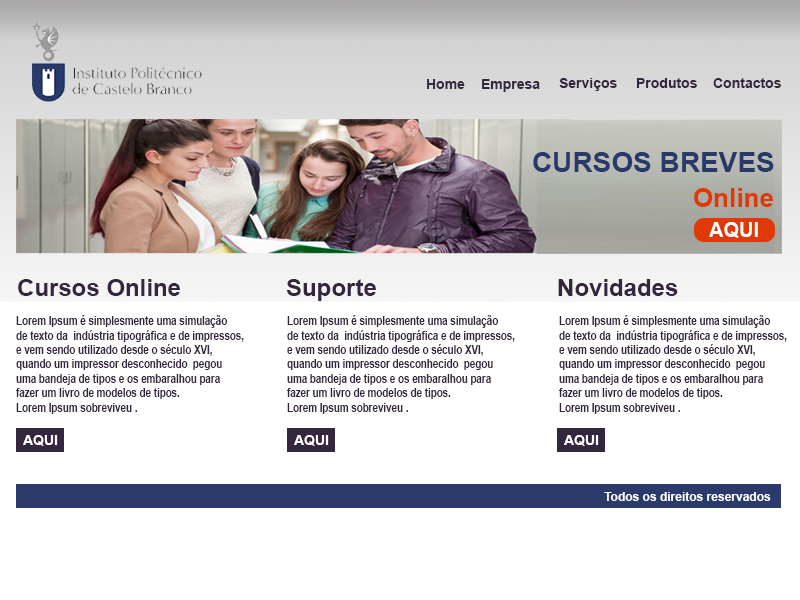
<style>
.page{position:relative;width:800px;height:600px;background:#ffffff}
.page>*{position:absolute;margin:0}
.t1{font:14px "Arial-BoldMT";color:#35263f}
.t2{font:28px "Arial-BoldMT";color:#283a69}
.t3{font:26px "Arial-BoldMT";color:#de3906}
.t4{font:20px "Arial-BoldMT";color:#ffffff}
.t5{font:24px "Arial-BoldMT";color:#35263f}
.t6{font:12px "Arial-BoldMT";color:#35263f;scale:0.82 1}
.t7{font:12px "Arial-BoldMT";color:#ffffff}
</style>
<div class="page">
<p class="t1" style="left:559px;top:78px;width:58px;height:13px">Serviços</p>
<p class="t1" style="left:636px;top:78px;width:61px;height:10px">Produtos</p>
<p class="t1" style="left:713px;top:78px;width:68px;height:10px">Contactos</p>
<p class="t1" style="left:427px;top:79px;width:38px;height:10px">Home</p>
<p class="t1" style="left:482px;top:79px;width:58px;height:13px">Empresa</p>
<p class="t2" style="left:533px;top:152px;width:241px;height:20px">CURSOS BREVES</p>
<p class="t3" style="left:694px;top:188px;width:79px;height:19px">Online</p>
<p class="t4" style="left:709px;top:222px;width:49px;height:16px">AQUI</p>
<p class="t5" style="left:18px;top:279px;width:162px;height:17px">Cursos Online</p>
<p class="t5" style="left:286px;top:279px;width:90px;height:22px">Suporte</p>
<p class="t5" style="left:558px;top:279px;width:120px;height:17px">Novidades</p>
<p class="t6" style="left:16px;top:315px;width:228px;height:99px">Lorem Ipsum é simplesmente uma simulação<br>de texto da  indústria tipográfica e de impressos,<br>e vem sendo utilizado desde o século XVI, <br>quando um impressor desconhecido  pegou <br>uma bandeja de tipos e os embaralhou para <br>fazer um livro de modelos de tipos. <br>Lorem Ipsum sobreviveu .</p>
<p class="t6" style="left:287px;top:315px;width:228px;height:99px">Lorem Ipsum é simplesmente uma simulação<br>de texto da  indústria tipográfica e de impressos,<br>e vem sendo utilizado desde o século XVI, <br>quando um impressor desconhecido  pegou <br>uma bandeja de tipos e os embaralhou para <br>fazer um livro de modelos de tipos. <br>Lorem Ipsum sobreviveu .</p>
<p class="t6" style="left:559px;top:315px;width:228px;height:99px">Lorem Ipsum é simplesmente uma simulação<br>de texto da  indústria tipográfica e de impressos,<br>e vem sendo utilizado desde o século XVI, <br>quando um impressor desconhecido  pegou <br>uma bandeja de tipos e os embaralhou para <br>fazer um livro de modelos de tipos. <br>Lorem Ipsum sobreviveu .</p>
<p class="t7" style="left:604px;top:492px;width:167px;height:9px">Todos os direitos reservados</p>
</div>
